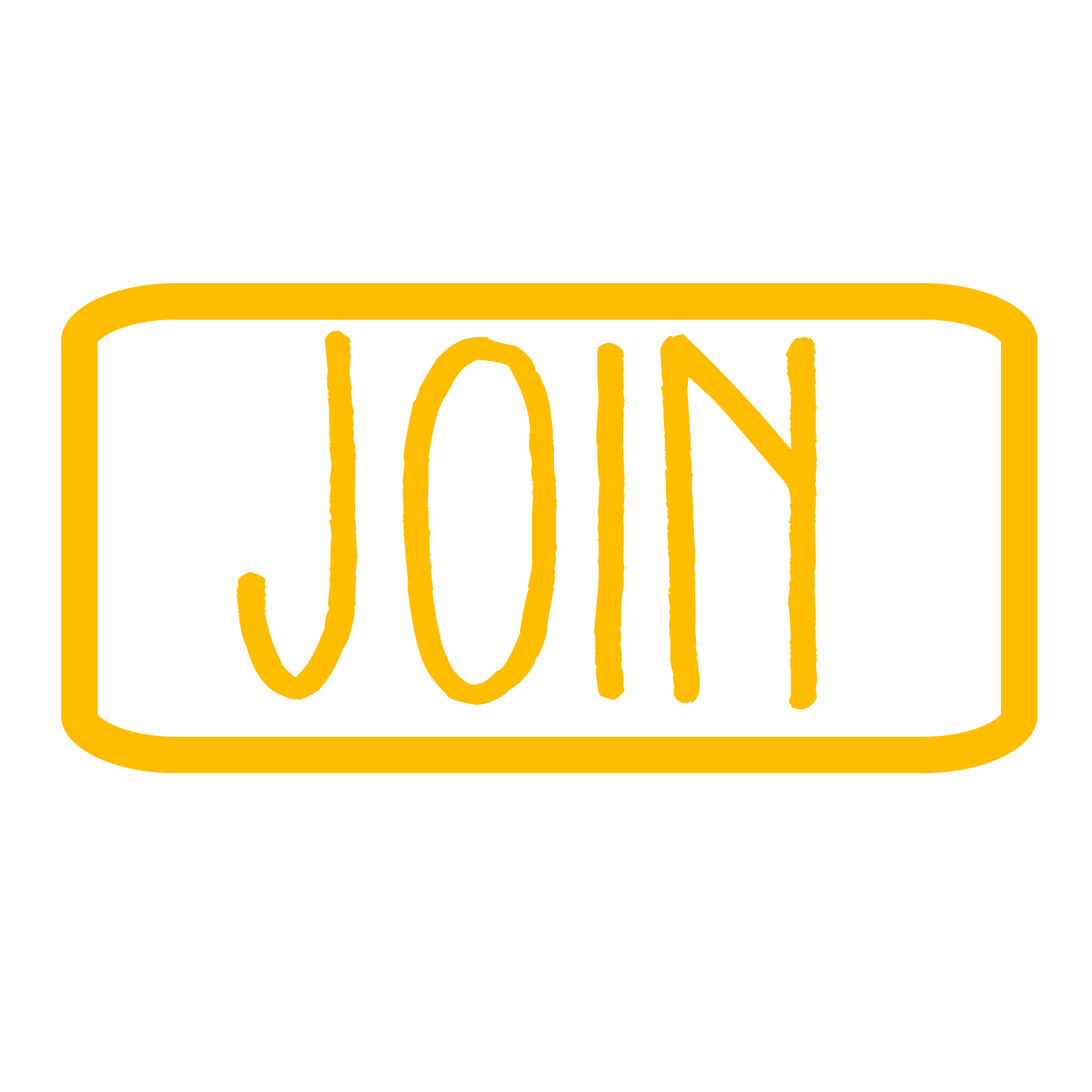
<style>
.page{position:relative;width:1092px;height:1092px;background:#ffffff}
.page>*{position:absolute;margin:0}
.t1{font:518.6px "AracneCondensedRegular";color:#ffbd00}
</style>
<div class="page">
<p class="t1" style="left:237px;top:331px;width:581px;height:379px">JOIN</p>
</div>
